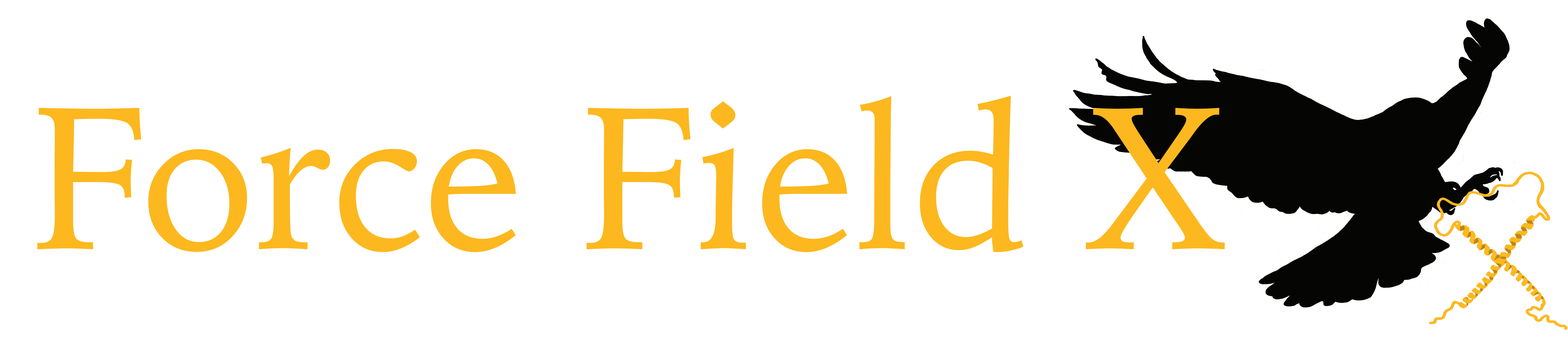
<style>
.page{position:relative;width:1568px;height:348px;background:#ffffff}
.page>*{position:absolute;margin:0}
.t1{font:203.3px "IowanOldStyle-Roman";color:#fcb81e}
</style>
<div class="page">
<p class="t1" style="left:37px;top:96px;width:1188px;height:156px">Force Field X</p>
</div>
